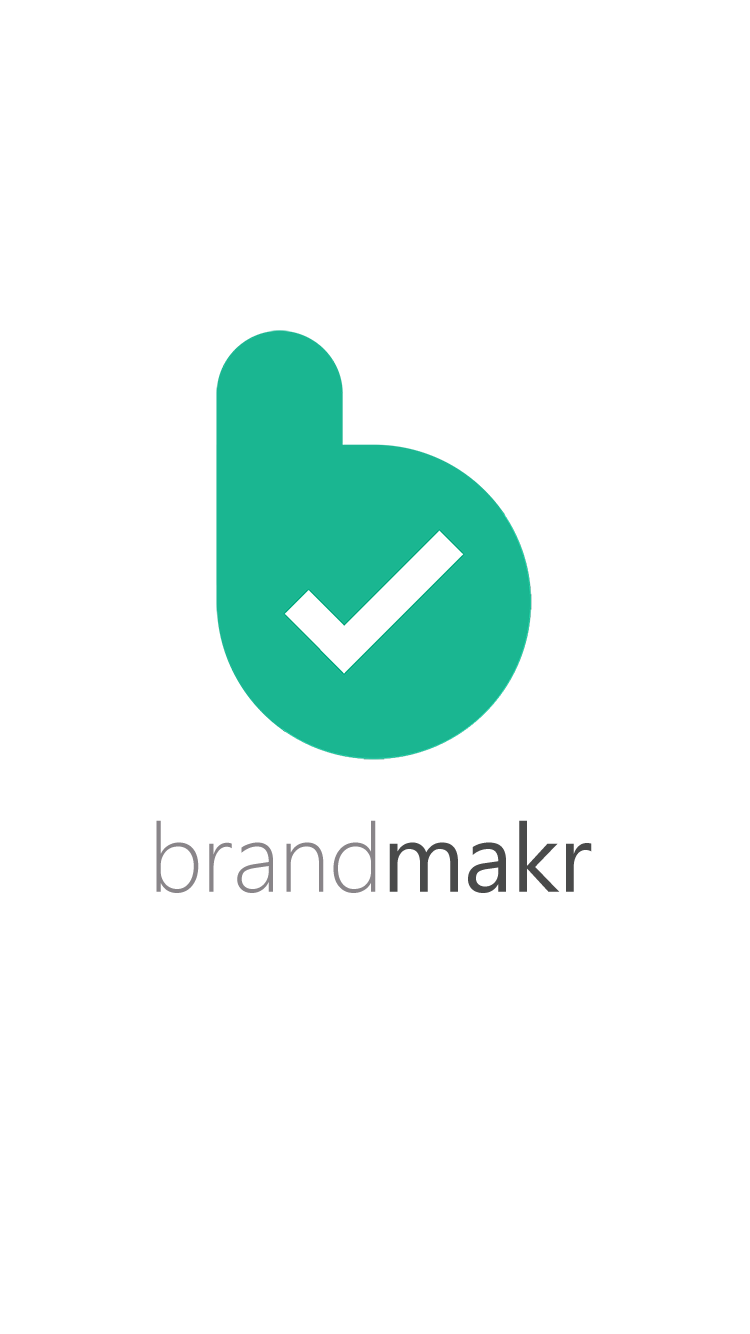
<style>
.page{position:relative;width:750px;height:1334px;background:#ffffff}
.page>*{position:absolute;margin:0}
.t1{font:96px "SegoeUI-Light";letter-spacing:-0.01em;color:#898589}
.t2{font:96px "SegoeUI";letter-spacing:-0.01em;color:#494a4a}
</style>
<div class="page">
<p class="t1" style="left:156px;top:820px;width:436px;height:73px">brand<span class="t2">makr</span></p>
</div>
